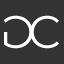
<style>
.page{position:relative;width:64px;height:64px;background:#333333}
.page>*{position:absolute;margin:0}
.t1{font:45.8px "Montserrat-Regular";letter-spacing:0.2em;color:#ffffff;text-transform:uppercase}
</style>
<div class="page">
<p class="t1" style="left:3px;top:15px;width:30px;height:34px;rotate:180deg">G</p>
<p class="t1" style="left:30px;top:15px;width:29px;height:34px">c</p>
</div>
